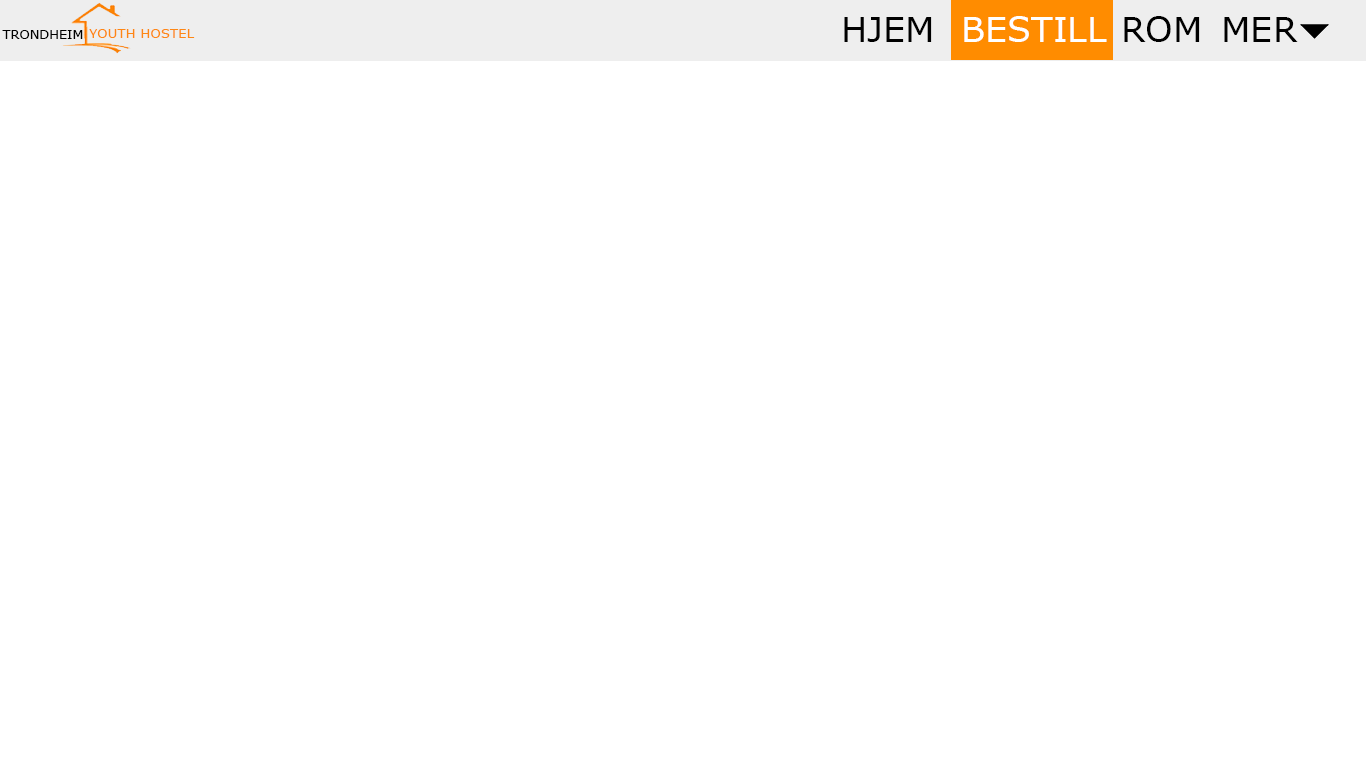
<style>
.page{position:relative;width:1366px;height:768px;background:#ffffff}
.page>*{position:absolute;margin:0}
.t1{font:35px "Verdana";color:#000000}
.t2{font:35px "Verdana";color:#ffffff}
.t3{font:12.9px "Verdana";color:#000000}
.t4{font:13.3px "Verdana";color:#fe8714}
</style>
<div class="page">
<p class="t1" style="left:844px;top:17px;width:88px;height:25px">HJEM</p>
<p class="t2" style="left:964px;top:16px;width:143px;height:26px">BESTILL</p>
<p class="t1" style="left:1124px;top:16px;width:76px;height:26px">ROM</p>
<p class="t1" style="left:1224px;top:17px;width:74px;height:25px">MER</p>
<p class="t3" style="left:2px;top:30px;width:81px;height:9px">TRONDHEIM</p>
<p class="t4" style="left:89px;top:29px;width:106px;height:9px">YOUTH HOSTEL</p>
</div>
